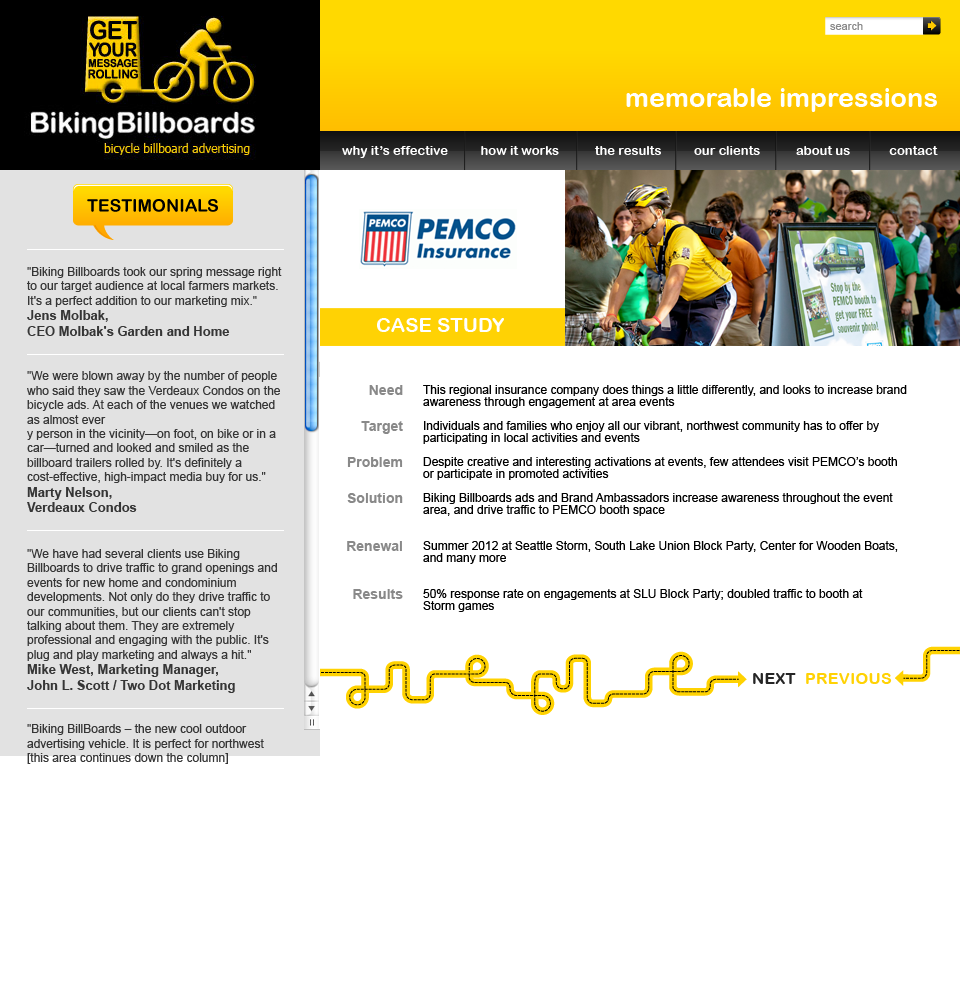
<style>
.page{position:relative;width:960px;height:1000px;background:#ffffff}
.page>*{position:absolute;margin:0}
.t1{font:11px "ArialMT";color:#898989}
.t2{font:27px "ArialRoundedMTBold";color:#ffffff}
.t3{font:13px "ArialRoundedMTBold";color:#ffffff}
.t4{font:12px "ArialMT";color:#363636}
.t5{font:13px "Arial-BoldMT";color:#363636}
.t6{font:20px "ArialRoundedMTBold";color:#ffffff}
.t7{font:14px/12px "Arial-BoldMT";color:#898989}
.t8{font:12px/12px "ArialMT";color:#000000}
.t9{font:16px "ArialRoundedMTBold";letter-spacing:0.02em;color:#252525}
.t10{font:16px "ArialRoundedMTBold";letter-spacing:0.02em;color:#ffd204}
</style>
<div class="page">
<p class="t1" style="left:830px;top:22px;width:33px;height:8px">search</p>
<p class="t2" style="left:626px;top:88px;width:311px;height:24px">memorable impressions</p>
<p class="t3" style="left:342px;top:146px;width:596px;height:12px">why it’s effective          how it works           the results          our clients           about us            contact</p>
<p class="t4" style="left:27px;top:267px;width:255px;height:497px">"Biking Billboards took our spring message right to our target audience at local farmers markets. It's a perfect addition to our marketing mix."<br><span class="t5">Jens Molbak, <br>CEO Molbak's Garden and Home<br><br></span><br>"We were blown away by the number of people who said they saw the Verdeaux Condos on the bicycle ads. At each of the venues we watched as almost ever<br>y person in the vicinity—on foot, on bike or in a car—turned and looked and smiled as the billboard trailers rolled by. It's definitely a cost-effective, high-impact media buy for us."<br><span class="t5">Marty Nelson, <br>Verdeaux Condos<br><br><br></span>"We have had several clients use Biking Billboards to drive traffic to grand openings and events for new home and condominium developments. Not only do they drive traffic to our communities, but our clients can't stop talking about them. They are extremely professional and engaging with the public. It's plug and play marketing and always a hit."<br><span class="t5">Mike West, Marketing Manager,<br>John L. Scott / Two Dot Marketing<br></span><br><br>"Biking BillBoards – the new cool outdoor advertising vehicle. It is perfect for northwest <br>[this area continues down the column]<br><br>gmessenger bag. We've used it and are impressed with the results."<br>Jeff Parry, Parry Advertising</p>
<p class="t6" style="left:377px;top:318px;width:127px;height:14px">CASE STUDY</p>
<p class="t7" style="left:347px;top:385px;width:56px;height:214px;text-align:right">Need<br><br><br>Target<br><br><br>Problem<br><br><br>Solution<br><br><br><br>Renewal<br><br><br><br>Results</p>
<p class="t8" style="left:423px;top:385px;width:484px;height:227px">This regional insurance company does things a little differently, and looks to increase brand awareness through engagement at area events <br><br>Individuals and families who enjoy all our vibrant, northwest community has to offer by participating in local activities and events<br><br>Despite creative and interesting activations at events, few attendees visit PEMCO’s booth or participate in promoted activities<br><br>Biking Billboards ads and Brand Ambassadors increase awareness throughout the event area, and drive traffic to PEMCO booth space<br><br><br>Summer 2012 at Seattle Storm, South Lake Union Block Party, Center for Wooden Boats, <br>and many more<br><br><br>50% response rate on engagements at SLU Block Party; doubled traffic to booth at <br>Storm games</p>
<p class="t9" style="left:753px;top:673px;width:43px;height:11px">NEXT</p>
<p class="t10" style="left:806px;top:673px;width:86px;height:11px">PREVIOUS</p>
</div>
